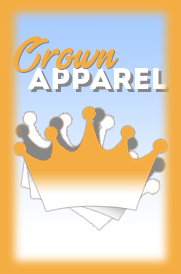
<style>
.page{position:relative;width:181px;height:274px}
.page>*{position:absolute;margin:0}
.t1{font:72px "EnlightenyourDestiny";color:#f4ad42}
.t2{font:30px "Intro";color:#ffffff}
.t3{font:30px "Intro"}
</style>
<div class="page">
<p class="t1" style="left:13px;top:36px;width:105px;height:36px">Crown</p>
<p class="t1" style="left:14px;top:37px;width:105px;height:36px">Crown</p>
<p class="t2" style="left:28px;top:68px;width:138px;height:21px">APPAREL</p>
<p class="t3" style="left:31px;top:71px;width:138px;height:21px">APPAREL</p>
</div>
